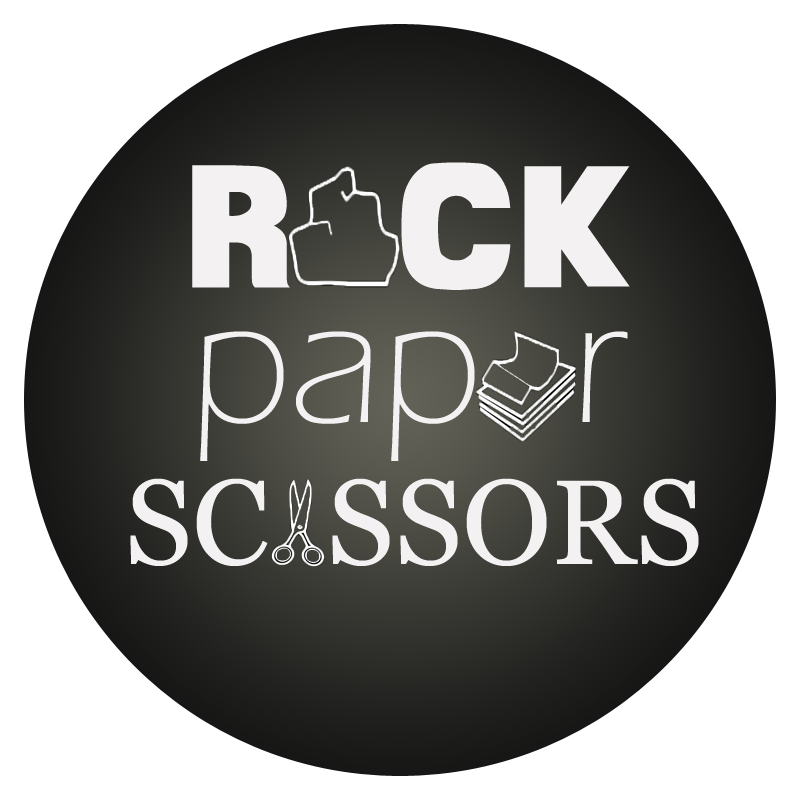
<style>
.page{position:relative;width:800px;height:800px;background:#ffffff}
.page>*{position:absolute;margin:0}
.t1{font:150px "CFGoliathDemo-Regular";color:#f3f1f1}
.t2{font:180px "ErasITC-Light";color:#f3f1f1}
.t3{font:120px "Georgia";color:#f3f1f1}
</style>
<div class="page">
<p class="t1" style="left:192px;top:162px;width:438px;height:128px">R  CK</p>
<p class="t2" style="left:200px;top:331px;width:428px;height:130px">pap  r</p>
<p class="t3" style="left:130px;top:478px;width:569px;height:88px">SC  SSORS</p>
</div>
